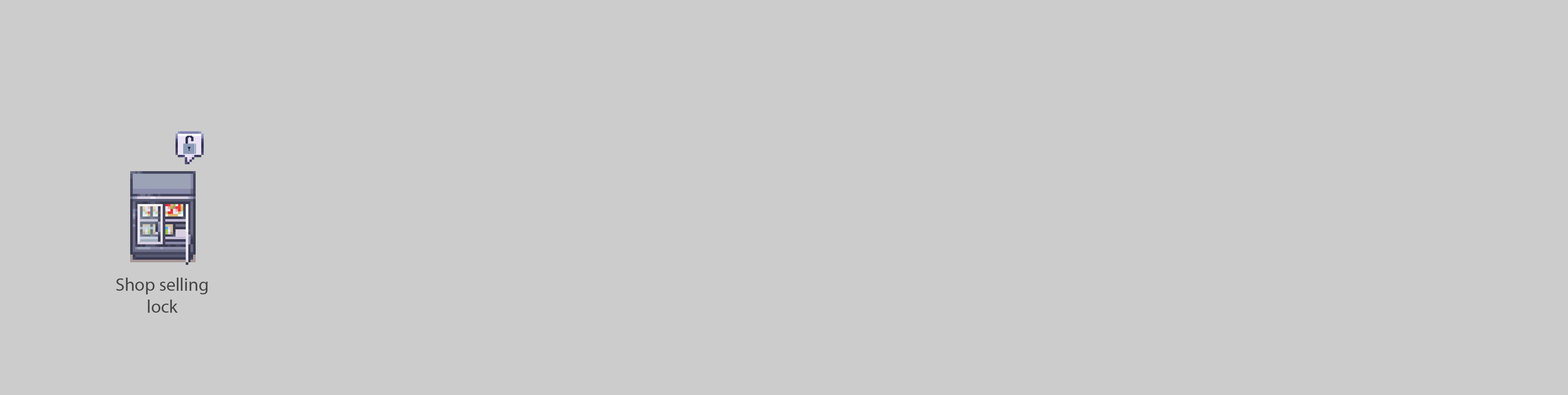
<style>
.page{position:relative;width:1568px;height:395px;background:#cccccc}
.page>*{position:absolute;margin:0}
.t1{font:18.3px "MyriadPro-Regular";color:#474747}
</style>
<div class="page">
<p class="t1" style="left:116px;top:278px;width:92px;height:35px;text-align:center">Shop selling lock</p>
</div>
